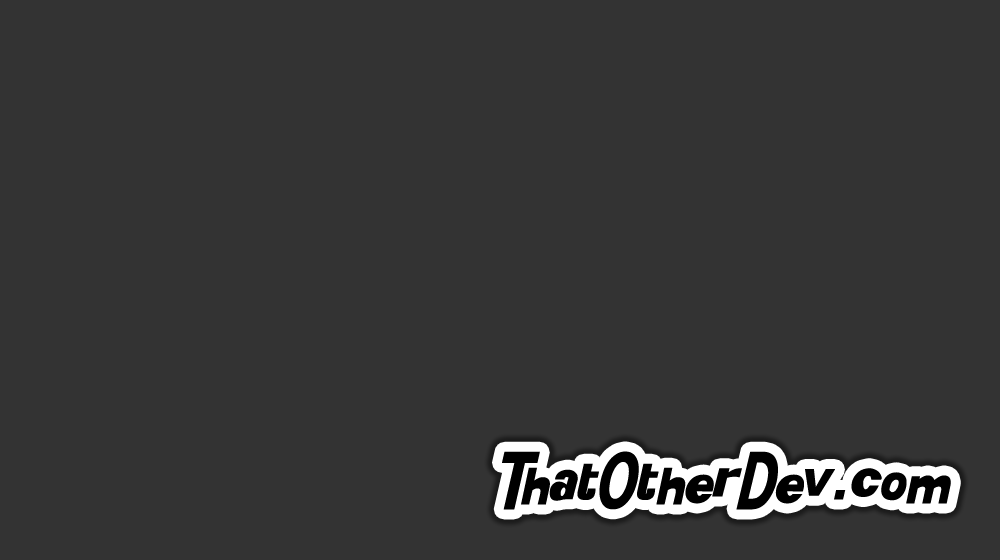
<style>
.page{position:relative;width:1000px;height:560px;background:#333333}
.page>*{position:absolute;margin:0}
.t1{font:48px "KittyKatt";color:#000000}
</style>
<div class="page">
<p class="t1" style="left:502px;top:451px;width:449px;height:59px">ThatOtherDev.com</p>
</div>
